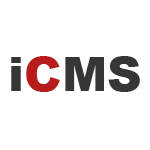
<style>
.page{position:relative;width:150px;height:150px;background:#ffffff}
.page>*{position:absolute;margin:0}
.t1{font:48px "Arial-Black";color:#363636}
.t2{font:48px "Arial-Black";color:#b71c1c}
</style>
<div class="page">
<p class="t1" style="left:11px;top:56px;width:129px;height:36px">i<span class="t2">C</span>MS</p>
</div>
